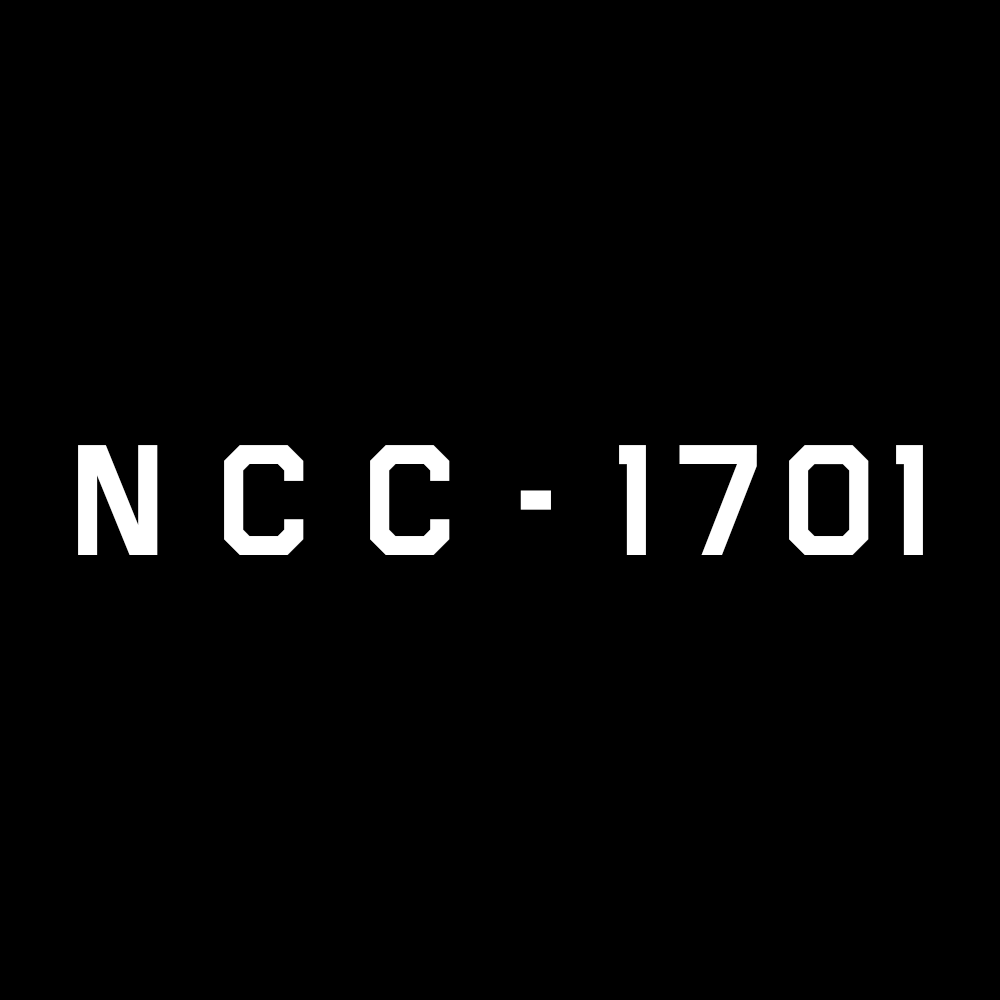
<style>
.page{position:relative;width:1000px;height:1000px;background:#000000}
.page>*{position:absolute;margin:0}
.t1{font:150px "Airborne";letter-spacing:0.01em;color:#ffffff}
.t2{font:150px "Airborne";letter-spacing:0.1em;color:#ffffff}
</style>
<div class="page">
<p class="t1" style="left:78px;top:445px;width:845px;height:110px">N C C - <span class="t2">1701</span></p>
</div>
